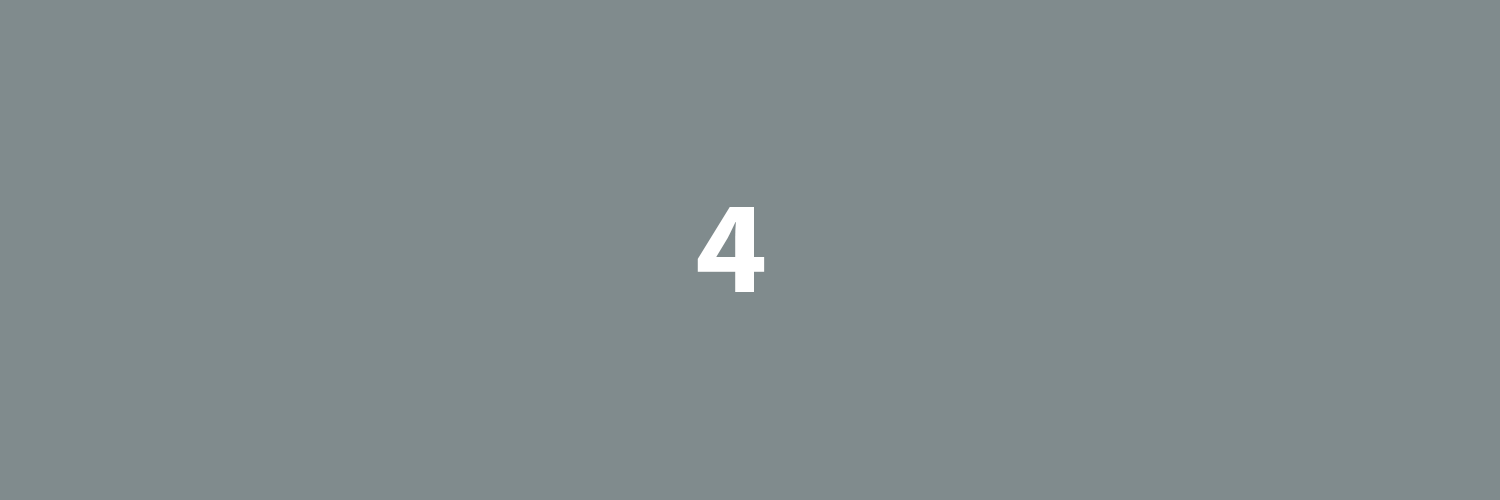
<style>
.page{position:relative;width:1500px;height:500px;background:#808b8d}
.page>*{position:absolute;margin:0}
.t1{font:130px "MyriadPro-Bold";color:#ffffff}
</style>
<div class="page">
<p class="t1" style="left:697px;top:207px;width:68px;height:85px">4</p>
</div>
